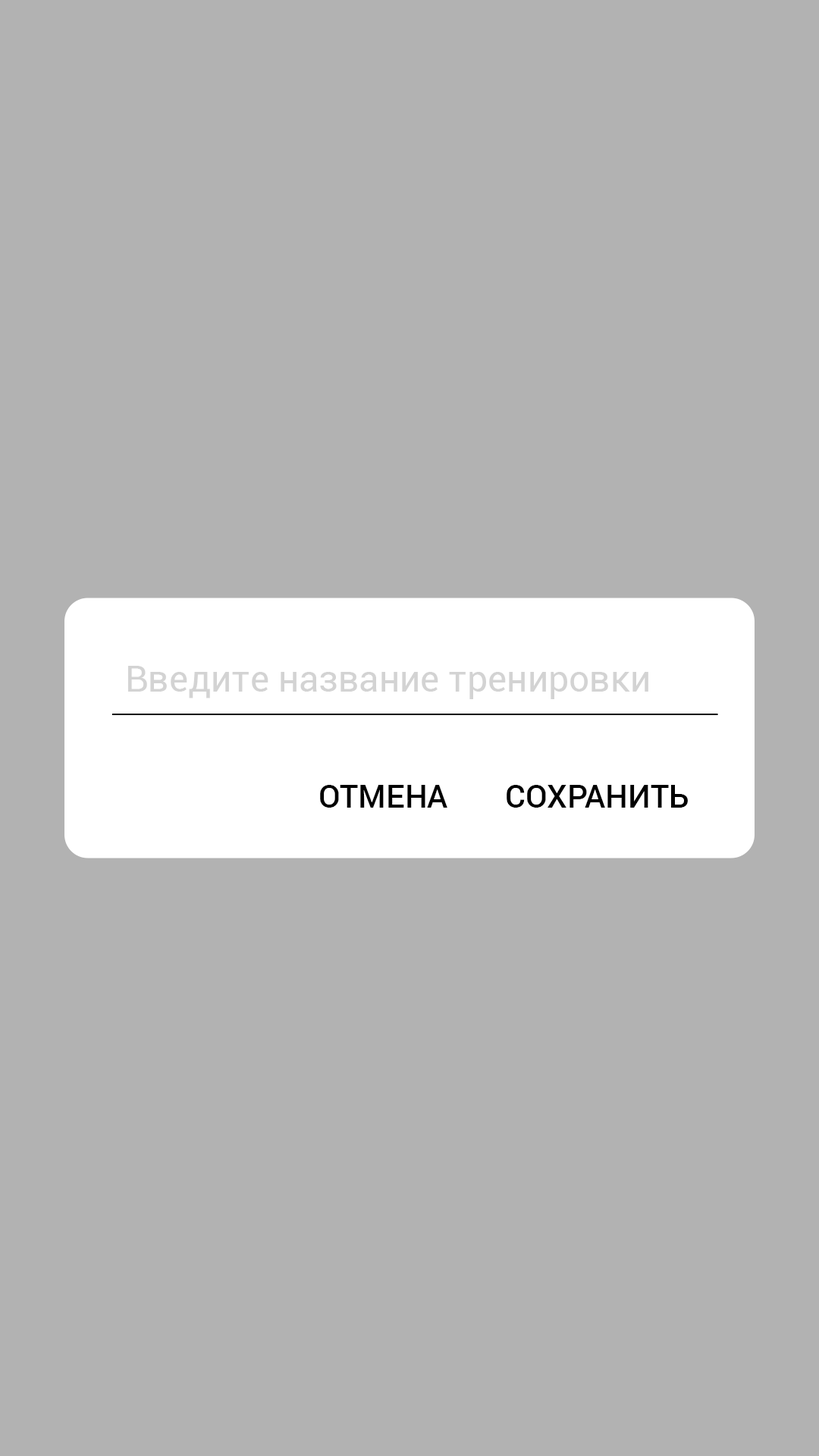
<style>
.page{position:relative;width:819px;height:1456px;background:#b2b2b2}
.page>*{position:absolute;margin:0}
.t1{font:36.4px "Roboto-Regular";color:#d3d3d3}
.t2{font:31.8px "Roboto-Medium";color:#000000}
</style>
<div class="page">
<p class="t1" style="left:128px;top:666px;width:520px;height:33px">Введите название тренировки</p>
<p class="t2" style="left:320px;top:785px;width:127px;height:23px">ОТМЕНА</p>
<p class="t2" style="left:507px;top:785px;width:181px;height:23px">СОХРАНИТЬ</p>
</div>
